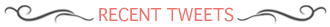
<style>
.page{position:relative;width:330px;height:27px;background:#ffffff}
.page>*{position:absolute;margin:0}
.t1{font:17px "Thonburi";letter-spacing:-0.005em;color:#ef746e}
</style>
<div class="page">
<p class="t1" style="left:99px;top:7px;width:135px;height:15px">RECENT TWEETS</p>
</div>
